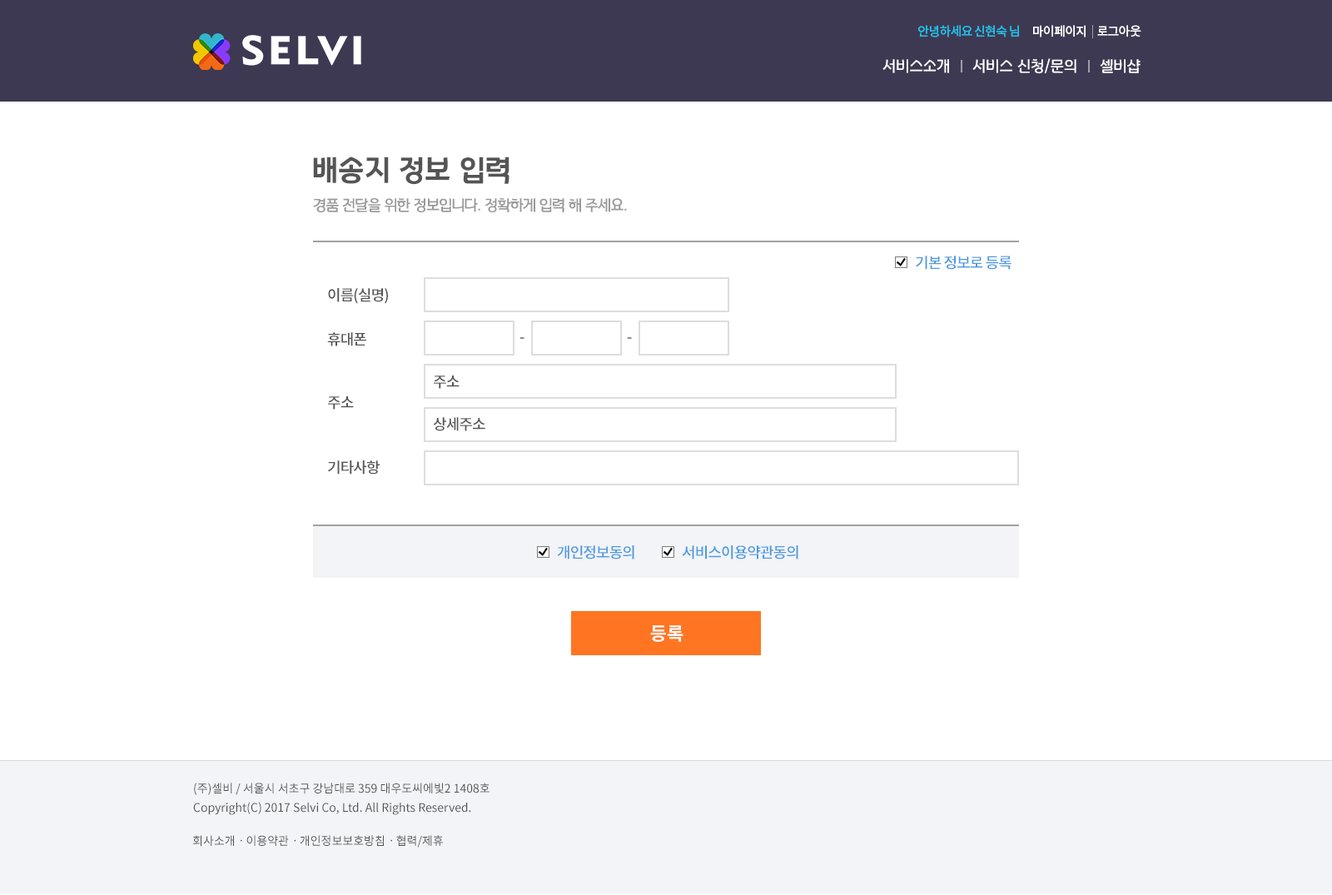
<style>
.page{position:relative;width:1332px;height:895px;background:#ffffff}
.page>*{position:absolute;margin:0}
.t1{font:12.5px "NotoSansCJKkr-Medium";letter-spacing:-0.05em;color:#21c0e8}
.t2{font:12.5px "NotoSansCJKkr-Medium";letter-spacing:-0.05em;color:#ffffff}
.t3{font:15px "KHNPHDotfR";color:#ffffff}
.t4{font:28.9px "KHNPHDotfB";color:#555555}
.t5{font:15px "KHNPHDotfR";letter-spacing:-0.05em;color:#999999}
.t6{font:15px "NotoSansCJKkr-Medium";letter-spacing:-0.05em;color:#4e9ae1}
.t7{font:15px/44px "NotoSansCJKkr-Medium";letter-spacing:-0.05em;color:#555555}
.t8{font:15px/63.2px "NotoSansCJKkr-Medium";letter-spacing:-0.05em;color:#555555}
.t9{font:15px/64.8px "NotoSansCJKkr-Medium";letter-spacing:-0.05em;color:#555555}
.t10{font:15px "NotoSansCJKkr-Medium";letter-spacing:-0.05em}
.t11{font:15px "NotoSansCJKkr-Medium";letter-spacing:-0.05em;color:#555555}
.t12{font:18.3px "NotoSansCJKkr-Bold";color:#ffffff}
.t13{font:11.7px/19.2px "NotoSansCJKkr-Regular";color:#515151}
.t14{font:11.7px "NotoSansCJKkr-Regular";color:#515151}
</style>
<div class="page">
<p class="t1" style="left:918px;top:25px;width:101px;height:12px">안녕하세요 신현숙 님</p>
<p class="t2" style="left:1033px;top:25px;width:53px;height:12px">마이페이지</p>
<p class="t2" style="left:1097px;top:25px;width:45px;height:12px">로그아웃</p>
<p class="t3" style="left:883px;top:58px;width:258px;height:16px">서비스소개     서비스 신청/문의     셀비샵</p>
<p class="t4" style="left:313px;top:157px;width:197px;height:28px">배송지 정보 입력</p>
<p class="t5" style="left:313px;top:197px;width:314px;height:16px">경품 전달을 위한 정보입니다. 정확하게 입력 해 주세요.</p>
<p class="t6" style="left:916px;top:256px;width:96px;height:14px">기본 정보로 등록</p>
<p class="t7" style="left:327px;top:288px;width:61px;height:187px">이름(실명)<br>휴대폰<br><span class="t8">주소<br></span><span class="t9">기타사항</span></p>
<p class="t10" style="left:520px;top:337px;width:5px;height:2px">-</p>
<p class="t10" style="left:627px;top:337px;width:5px;height:2px">-</p>
<p class="t11" style="left:434px;top:376px;width:26px;height:13px">주소</p>
<p class="t11" style="left:433px;top:417px;width:52px;height:14px">상세주소</p>
<p class="t6" style="left:557px;top:545px;width:77px;height:15px">개인정보동의</p>
<p class="t6" style="left:682px;top:545px;width:116px;height:15px">서비스이용약관동의</p>
<p class="t12" style="left:650px;top:625px;width:34px;height:17px">등록</p>
<p class="t13" style="left:193px;top:783px;width:297px;height:32px">(주)셀비 / 서울시 서초구 강남대로 359 대우도씨에빛2 1408호<br>Copyright(C) 2017 Selvi Co, Ltd. All Rights Reserved.</p>
<p class="t14" style="left:193px;top:835px;width:250px;height:13px">회사소개ㆍ이용약관ㆍ개인정보보호방침ㆍ협력/제휴</p>
</div>
